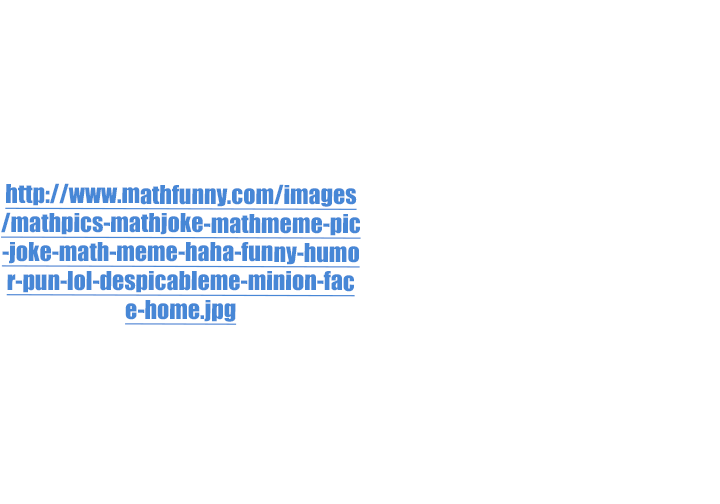
<style>
.page{position:relative;width:720px;height:504px;background:#ffffff}
.page>*{position:absolute;margin:0}
.t1{font:24px "Impact";color:#4787d6;text-decoration:underline}
</style>
<div class="page">
<p class="t1" style="left:1px;top:183px;width:360px;height:142px;text-align:center">http://www.mathfunny.com/images/mathpics-mathjoke-mathmeme-pic-joke-math-meme-haha-funny-humor-pun-lol-despicableme-minion-face-home.jpg</p>
</div>
